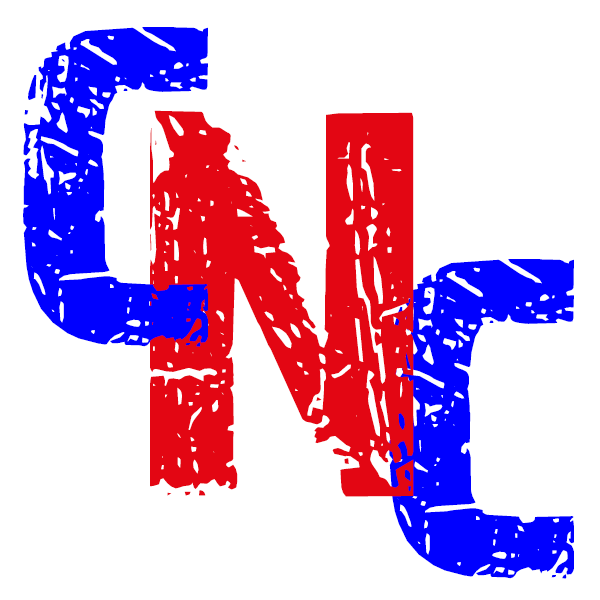
<style>
.page{position:relative;width:600px;height:600px;background:#ffffff}
.page>*{position:absolute;margin:0}
.t1{font:416.7px "28-Days-Later-Regular";color:#0000ff}
.t2{font:520.8px "28-Days-Later-Regular";color:#e30613}
</style>
<div class="page">
<p class="t1" style="left:23px;top:27px;width:185px;height:320px">C</p>
<p class="t2" style="left:150px;top:110px;width:264px;height:387px">N</p>
<p class="t1" style="left:389px;top:259px;width:185px;height:320px">C</p>
</div>
